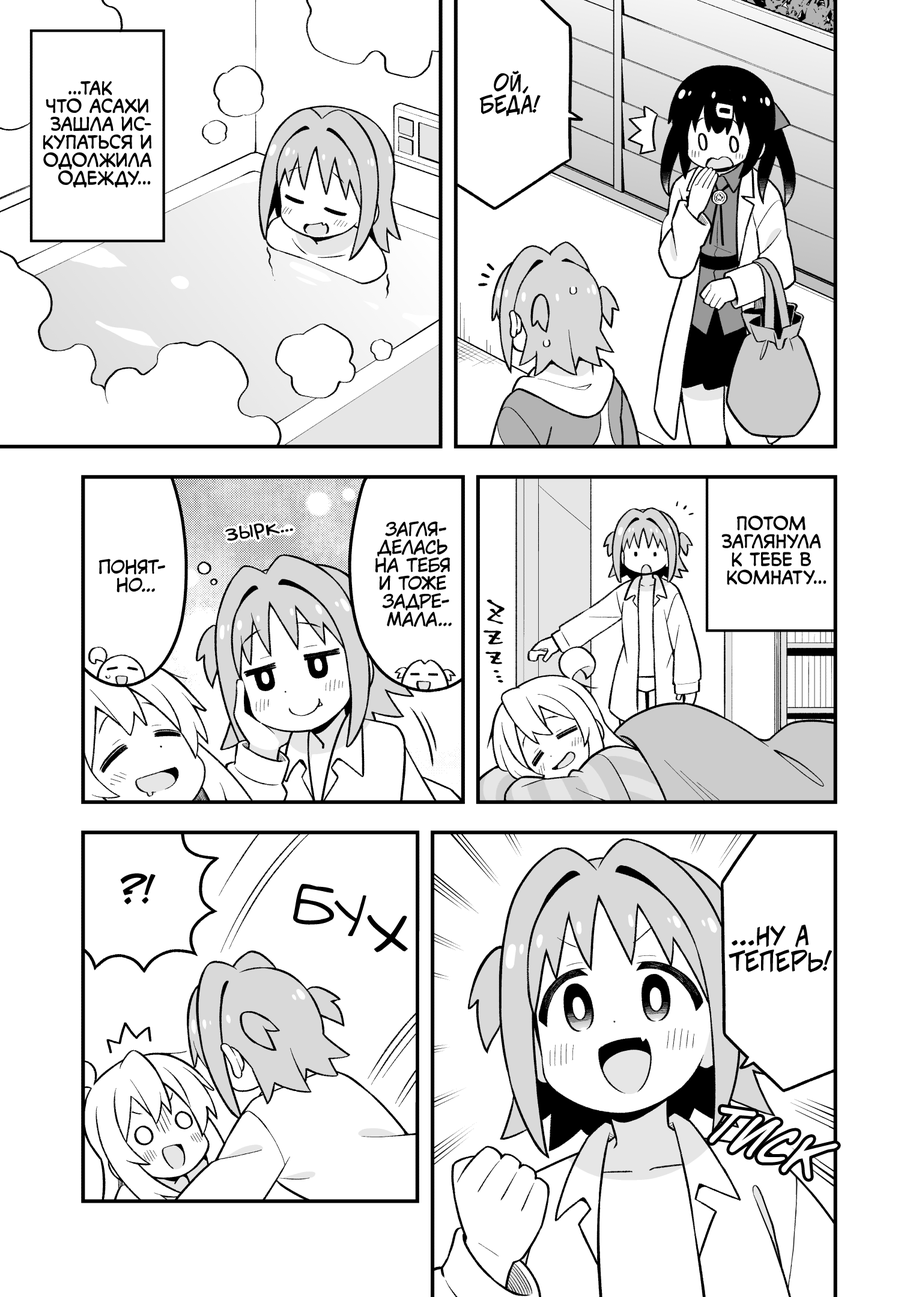
<style>
.page{position:relative;width:919px;height:1297px;background:#ffffff}
.page>*{position:absolute;margin:0}
.t1{font:21.6px "v_CCJeffCampbell";color:#000000;text-transform:uppercase}
.t2{font:18px "v_CCMonologous";color:#000000;text-transform:uppercase}
.t3{font:18px "KuraiVoice2";color:#000000;text-transform:uppercase}
.t4{font:25.2px "v_Augie";color:#000000}
.t5{font:36px "v_CCJeffCampbell";color:#000000;text-transform:uppercase}
.t6{font:54.1px "v_Augie";color:#000000;text-transform:uppercase}
.t7{font:25.2px "v_CCJeffCampbell";color:#000000;text-transform:uppercase}
</style>
<div class="page">
<p class="t1" style="left:479px;top:70px;width:62px;height:47px;text-align:center">Ой,<br>беда!</p>
<p class="t2" style="left:43px;top:80px;width:108px;height:108px;text-align:center">...Так<br>что Асахи<br>зашла ис-<br>купаться и<br>одолжила<br>одежду...</p>
<p class="t3" style="left:375px;top:521px;width:77px;height:106px;text-align:center">Загля-<br>делась<br>на тебя<br>и тоже<br>задре-<br>мала...</p>
<p class="t2" style="left:721px;top:515px;width:106px;height:70px;text-align:center">Потом<br>заглянула<br>к тебе в<br>комнату...</p>
<p class="t4" style="left:225px;top:523px;width:68px;height:18px;rotate:-9deg">зырк...</p>
<p class="t3" style="left:99px;top:559px;width:66px;height:34px;text-align:center">Понят-<br>но...</p>
<p class="t5" style="left:120px;top:873px;width:36px;height:32px">?!</p>
<p class="t6" style="left:293px;top:884px;width:41px;height:41px;rotate:12deg">б</p>
<p class="t6" style="left:335px;top:896px;width:31px;height:40px">у</p>
<p class="t6" style="left:367px;top:915px;width:41px;height:38px;rotate:10deg">х</p>
<p class="t7" style="left:729px;top:925px;width:104px;height:48px;text-align:center">...Ну а<br>теперь!</p>
</div>
